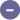
<style>
.page{position:relative;width:20px;height:20px;background:#666699}
.page>*{position:absolute;margin:0}
.t1{font:24px "Verdana";letter-spacing:0.05em;color:#ffffff}
</style>
<div class="page">
<p class="t1" style="left:6px;top:9px;width:8px;height:3px">-</p>
</div>
